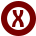
<style>
.page{position:relative;width:36px;height:36px;background:#790000}
.page>*{position:absolute;margin:0}
.t1{font:20.2px "HoboStd";color:#790000}
</style>
<div class="page">
<p class="t1" style="left:12px;top:10px;width:12px;height:17px">X</p>
</div>
